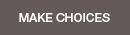
<style>
.page{position:relative;width:130px;height:35px;background:#645a5b}
.page>*{position:absolute;margin:0}
.t1{font:12px "HelveticaNeue-Medium";color:#ffffff}
</style>
<div class="page">
<p class="t1" style="left:19px;top:13px;width:91px;height:9px">MAKE CHOICES</p>
</div>
